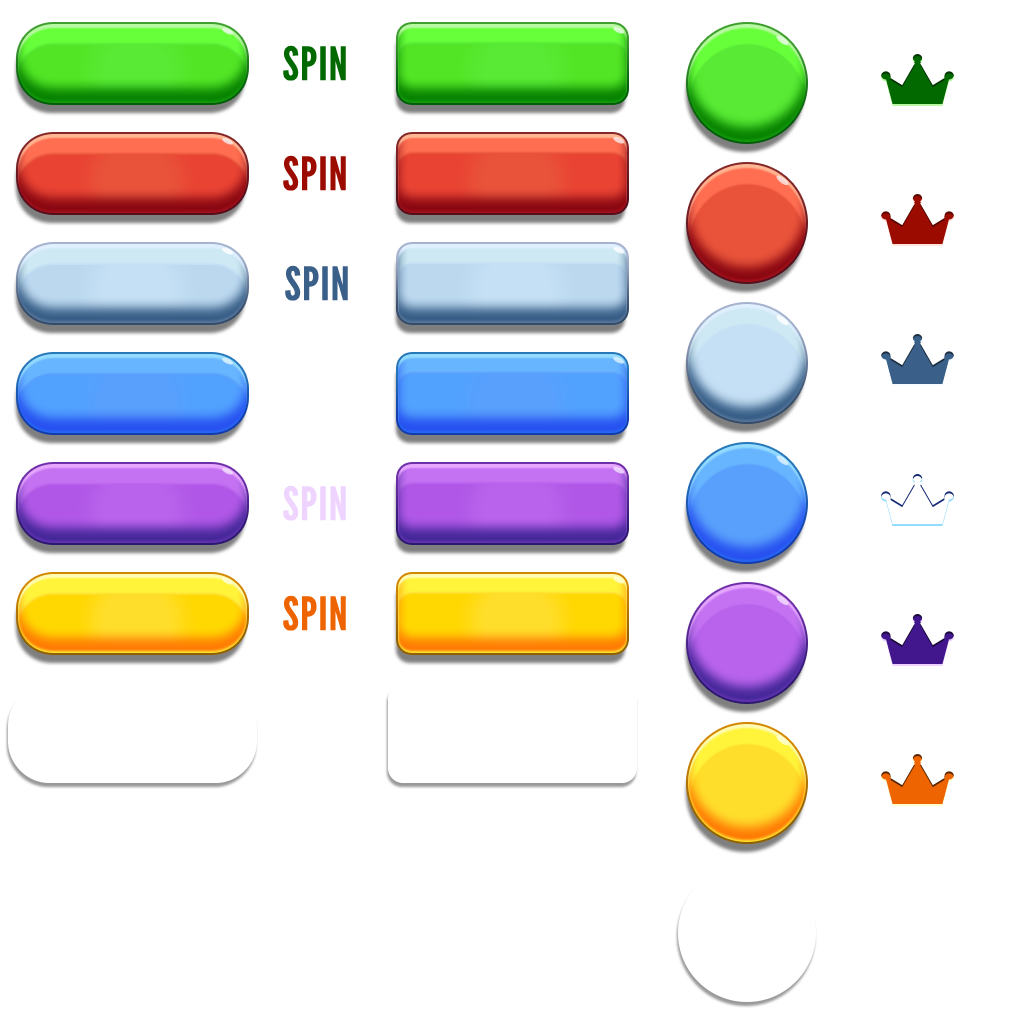
<style>
.page{position:relative;width:1024px;height:1024px;background:#ffffff}
.page>*{position:absolute;margin:0}
.t1{font:45.9px "LeagueGothic";letter-spacing:0.025em;color:#026800;scale:1.05 1}
.t2{font:45.9px "LeagueGothic";letter-spacing:0.025em;color:#9b0b00;scale:1.05 1}
.t3{font:45.9px "LeagueGothic";letter-spacing:0.025em;color:#3a6089;scale:1.05 1}
.t4{font:45.9px "LeagueGothic";letter-spacing:0.025em;color:#eed4ff;scale:1.05 1}
.t5{font:45.9px "LeagueGothic";letter-spacing:0.025em;color:#ed6400;scale:1.05 1}
</style>
<div class="page">
<p class="t1" style="left:283px;top:45px;width:63px;height:36px">SPIN</p>
<p class="t2" style="left:283px;top:155px;width:63px;height:36px">SPIN</p>
<p class="t3" style="left:285px;top:265px;width:63px;height:36px">SPIN</p>
<p class="t4" style="left:283px;top:485px;width:63px;height:36px">SPIN</p>
<p class="t5" style="left:283px;top:595px;width:63px;height:36px">SPIN</p>
</div>
